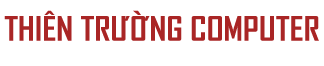
<style>
.page{position:relative;width:324px;height:66px;background:#ffffff}
.page>*{position:absolute;margin:0}
.t1{font:32.2px "SVN-AgencyFBBold";color:#a92525;scale:1.1 1}
</style>
<div class="page">
<p class="t1" style="left:4px;top:10px;width:315px;height:31px">THIÊN TRƯỜNG COMPUTER</p>
</div>
